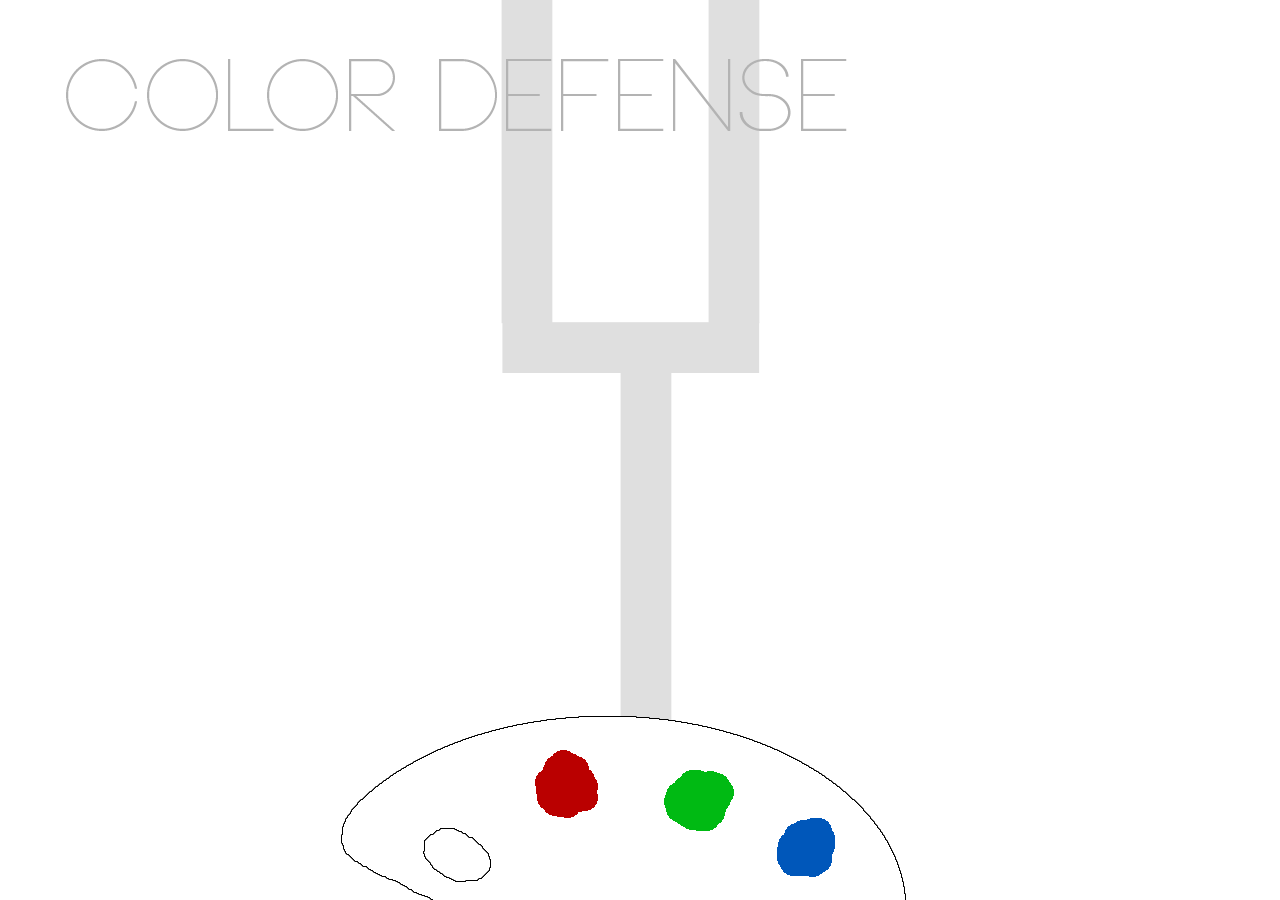
<style>
.page{position:relative;width:1280px;height:900px;background:#ffffff}
.page>*{position:absolute;margin:0}
.t1{font:100px "Neou-Thin";color:#b3b3b3}
</style>
<div class="page">
<p class="t1" style="left:66px;top:59px;width:781px;height:72px">Color Defense</p>
</div>
